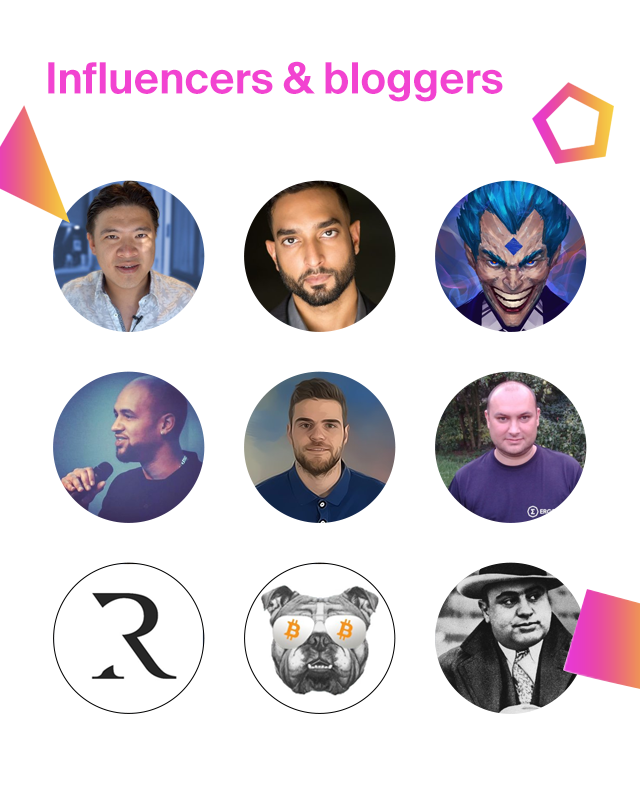
<style>
.page{position:relative;width:640px;height:803px;background:#ffffff}
.page>*{position:absolute;margin:0}
.t1{font:43px "SuisseIntl-SemiBold";color:#f243d1}
</style>
<div class="page">
<p class="t1" style="left:48px;top:61px;width:455px;height:41px">Influencers &amp; bloggers</p>
</div>
